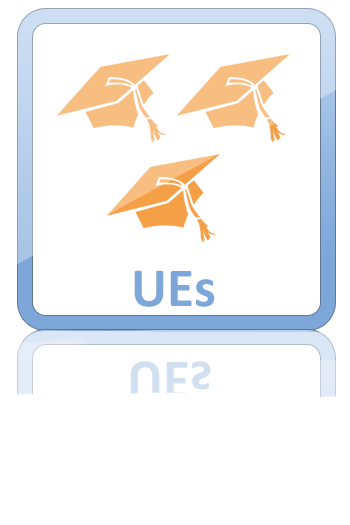
<style>
.page{position:relative;width:350px;height:525px;background:#ffffff}
.page>*{position:absolute;margin:0}
.t1{font:55.4px "Calibri-Bold";color:#7da7d9}
.t2{font:57.3px "Calibri-Bold";color:#d1e0f1;scale:0.97 1}
</style>
<div class="page">
<p class="t1" style="left:134px;top:270px;width:81px;height:37px">UEs</p>
<p class="t2" style="left:130px;top:361px;width:81px;height:38px">UEs</p>
</div>
